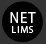
<style>
.page{position:relative;width:46px;height:44px;background:#000000}
.page>*{position:absolute;margin:0}
.t1{font:15px "MyriadPro-Regular";letter-spacing:0.06em;color:#ffffff}
.t2{font:10px "MyriadPro-Regular";letter-spacing:0.06em;color:#ffffff}
</style>
<div class="page">
<p class="t1" style="left:10px;top:12px;width:26px;height:11px">NET</p>
<p class="t2" style="left:12px;top:26px;width:22px;height:7px">LIMS</p>
</div>
